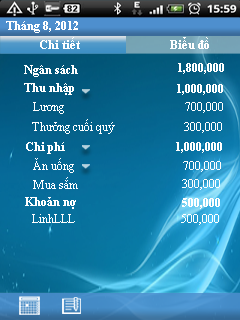
<style>
.page{position:relative;width:240px;height:320px}
.page>*{position:absolute;margin:0}
.t1{font:11.6px "TimesNewRomanPS-BoldMT";color:#ffffff}
.t2{font:11.6px "TimesNewRomanPSMT";color:#ffffff}
</style>
<div class="page">
<p class="t1" style="left:6px;top:21px;width:72px;height:12px">Tháng 8, 2012</p>
<p class="t1" style="left:40px;top:37px;width:40px;height:12px">Chi tiết</p>
<p class="t1" style="left:170px;top:37px;width:39px;height:12px">Biểu đồ</p>
<p class="t1" style="left:24px;top:65px;width:54px;height:12px">Ngân sách</p>
<p class="t1" style="left:178px;top:63px;width:46px;height:11px">1,800,000</p>
<p class="t1" style="left:24px;top:83px;width:50px;height:12px">Thu nhập</p>
<p class="t1" style="left:177px;top:84px;width:46px;height:11px">1,000,000</p>
<p class="t2" style="left:33px;top:102px;width:31px;height:12px">Lương</p>
<p class="t2" style="left:185px;top:102px;width:38px;height:11px">700,000</p>
<p class="t2" style="left:32px;top:119px;width:83px;height:15px">Thưởng cuối quý</p>
<p class="t2" style="left:184px;top:122px;width:38px;height:11px">300,000</p>
<p class="t1" style="left:26px;top:142px;width:39px;height:12px">Chi phí</p>
<p class="t1" style="left:176px;top:142px;width:46px;height:11px">1,000,000</p>
<p class="t2" style="left:33px;top:158px;width:41px;height:15px">Ăn uống</p>
<p class="t2" style="left:183px;top:161px;width:38px;height:11px">700,000</p>
<p class="t2" style="left:33px;top:177px;width:45px;height:12px">Mua sắm</p>
<p class="t2" style="left:182px;top:179px;width:38px;height:11px">300,000</p>
<p class="t1" style="left:25px;top:197px;width:51px;height:12px">Khoản nợ</p>
<p class="t1" style="left:182px;top:198px;width:38px;height:11px">500,000</p>
<p class="t2" style="left:32px;top:214px;width:43px;height:9px">LinhLLL</p>
<p class="t2" style="left:181px;top:214px;width:38px;height:11px">500,000</p>
</div>
